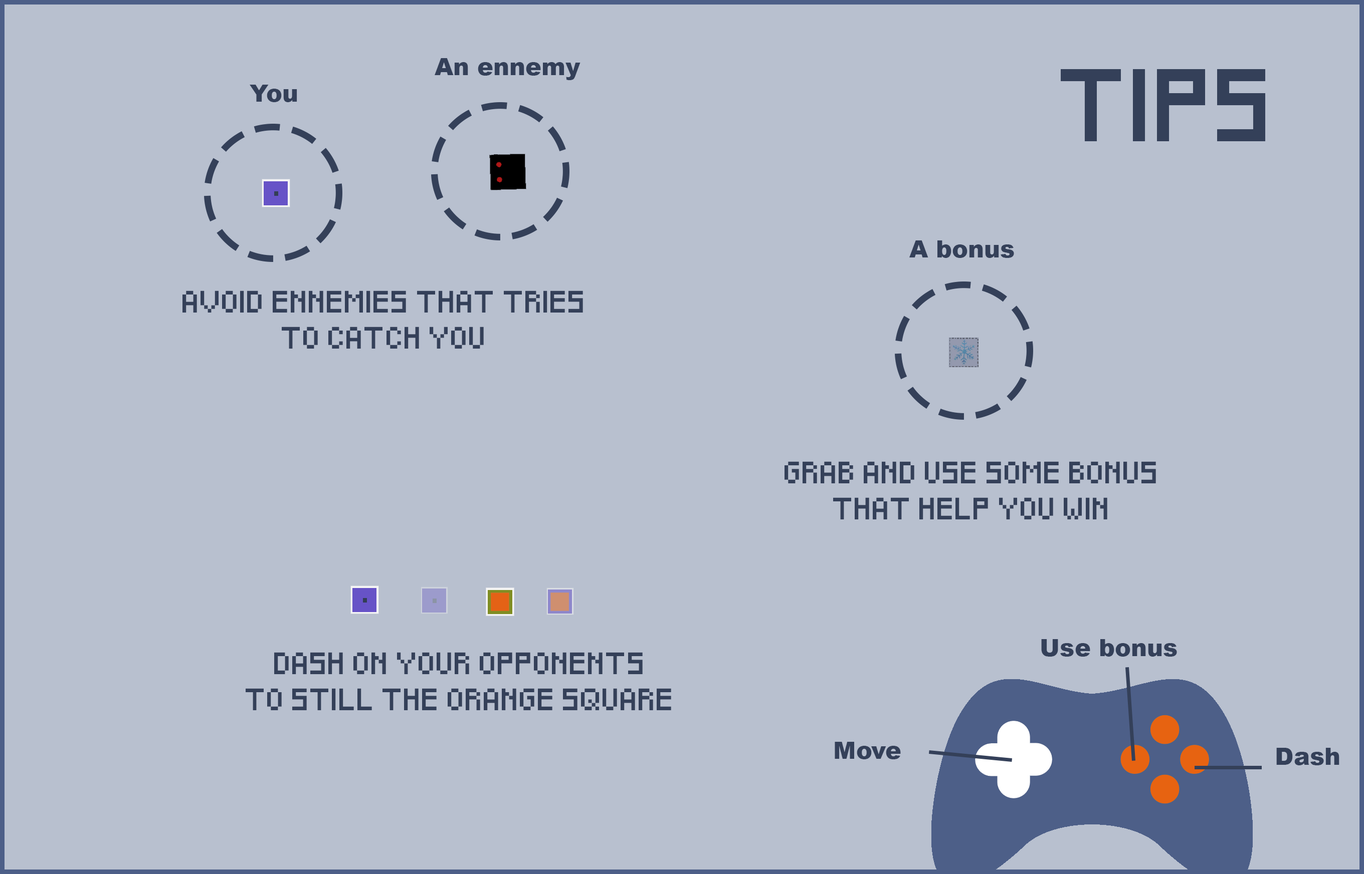
<style>
.page{position:relative;width:1364px;height:874px;background:#b8c0cf}
.page>*{position:absolute;margin:0}
.t1{font:24.1px "Arial-Black";color:#344059}
.t2{font:60.1px "Pixeled";color:#344059}
.t3{font:18px/36.1px "Pixeled";color:#344059}
</style>
<div class="page">
<p class="t1" style="left:434px;top:58px;width:146px;height:22px">An ennemy</p>
<p class="t2" style="left:1060px;top:69px;width:205px;height:72px">TIPS</p>
<p class="t1" style="left:250px;top:85px;width:47px;height:17px">You</p>
<p class="t1" style="left:909px;top:241px;width:105px;height:17px">A bonus</p>
<p class="t3" style="left:182px;top:291px;width:401px;height:58px;text-align:center">AVOID ENNEMIES THAT TRIES<br>TO CATCH YOU</p>
<p class="t3" style="left:784px;top:462px;width:372px;height:58px;text-align:center">GRAB AND USE SOME BONUS<br>THAT HELP YOU WIN</p>
<p class="t1" style="left:1041px;top:639px;width:136px;height:18px">Use bonus</p>
<p class="t3" style="left:246px;top:652px;width:425px;height:59px;text-align:center">DASH ON YOUR OPPONENTS<br>TO STILL THE ORANGE SQUARE</p>
<p class="t1" style="left:834px;top:742px;width:67px;height:18px">Move</p>
<p class="t1" style="left:1276px;top:748px;width:63px;height:18px">Dash</p>
</div>
